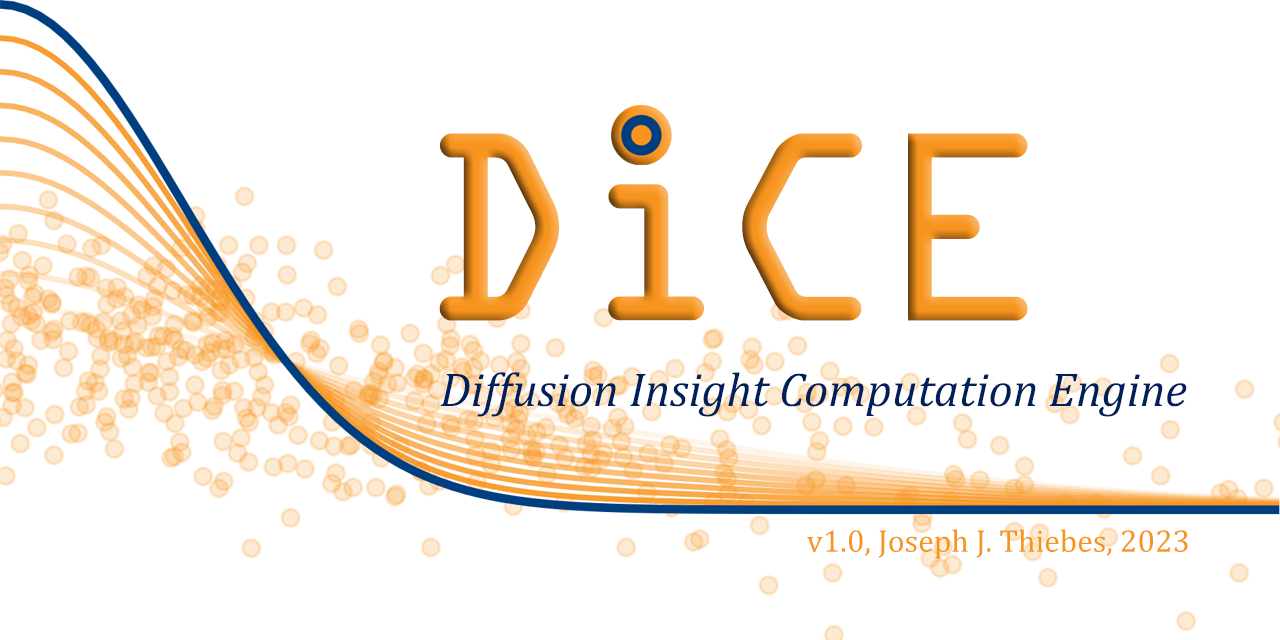
<style>
.page{position:relative;width:1280px;height:640px;background:#ffffff}
.page>*{position:absolute;margin:0}
.t1{font:288px "OCRAExtended"}
.t2{font:47.9px "Cambria-Italic";color:#00205b}
.t3{font:31.7px "Cambria";color:#f7941e}
</style>
<div class="page">
<p class="t1" style="left:439px;top:123px;width:589px;height:198px">DiCE</p>
<p class="t2" style="left:440px;top:372px;width:747px;height:45px">Diffusion Insight Computation Engine</p>
<p class="t3" style="left:807px;top:529px;width:381px;height:30px">v1.0, Joseph J. Thiebes, 2023</p>
</div>
